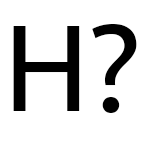
<style>
.page{position:relative;width:144px;height:144px;background:#ffffff}
.page>*{position:absolute;margin:0}
.t1{font:123.4px "Ubuntu";color:#000000}
</style>
<div class="page">
<p class="t1" style="left:13px;top:24px;width:124px;height:89px">H?</p>
</div>
